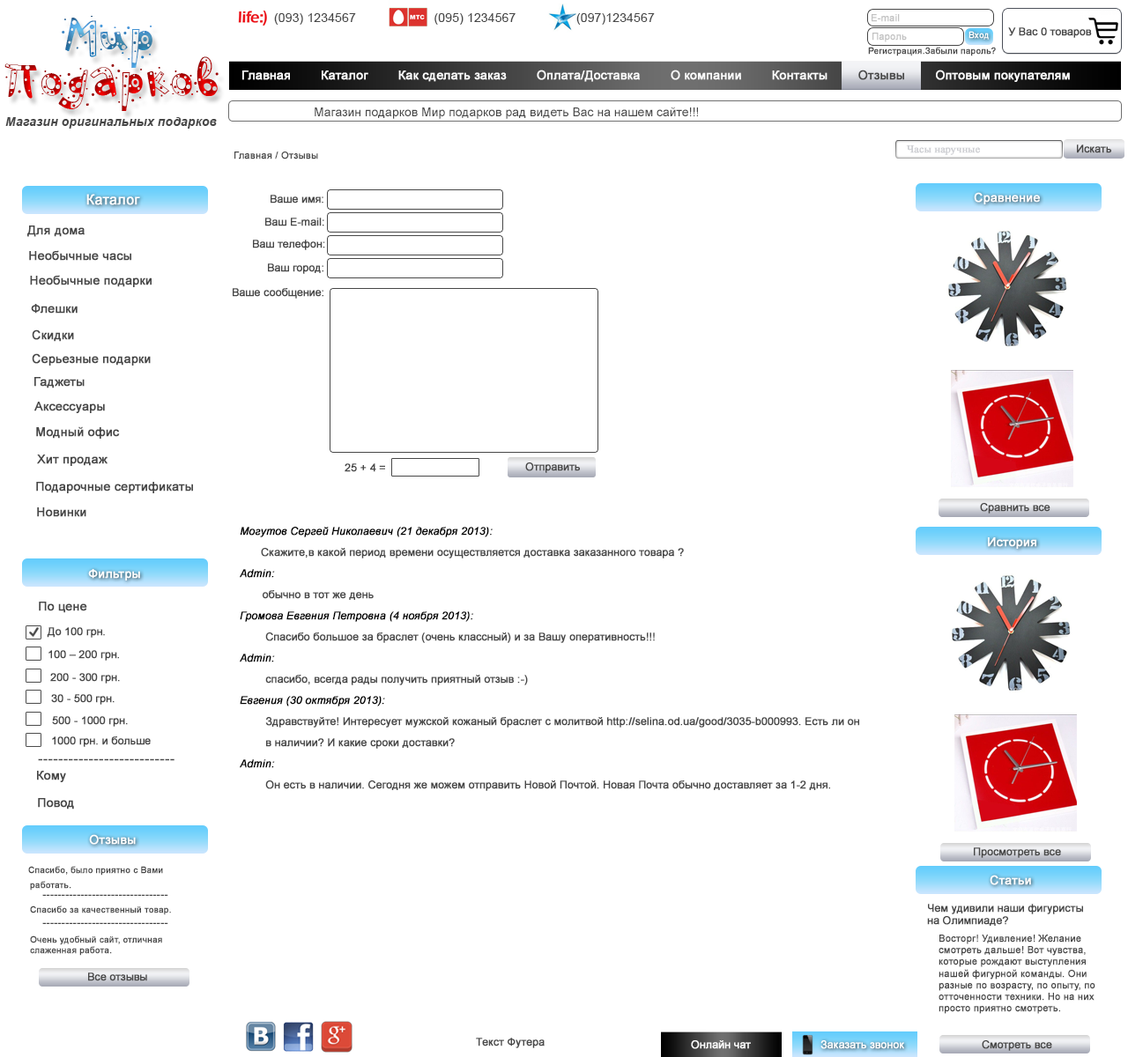
<style>
.page{position:relative;width:1128px;height:1057px;background:#ffffff}
.page>*{position:absolute;margin:0}
.t1{font:70.5px "PFPlayskoolPro-Confetti";letter-spacing:0.01em}
.t2{font:63.4px "PFPlayskoolPro-Confetti";letter-spacing:0.01em}
.t3{font:12.3px "ArialMT";letter-spacing:0.01em;color:#474747}
.t4{font:9.7px "ArialMT";color:#c1c1c1;font-weight:bold}
.t5{font:10.6px "ArialMT";color:#474747;font-weight:bold}
.t6{font:8.8px "ArialMT";color:#ffffff;font-weight:bold}
.t7{font:8.8px "ArialMT";color:#474747;font-weight:bold}
.t8{font:12.3px "ArialMT";color:#ffffff;font-weight:bold}
.t9{font:12.3px "ArialMT";color:#474747;font-weight:bold}
.t10{font:12.3px "ArialMT";color:#474747}
.t11{font:12.3px "Arial-BoldItalicMT";letter-spacing:0.01em;color:#474747}
.t12{font:10.6px "TimesNewRomanPSMT";color:#cecfd3;font-weight:bold}
.t13{font:9.7px "ArialMT";color:#474747;font-weight:bold}
.t14{font:14.1px "ArialMT";color:#ffffff;font-weight:bold}
.t15{font:10.6px/21.1px "ArialMT";color:#474747;font-weight:bold}
.t16{font:10.6px/21.1px "Arial-ItalicMT";color:#000000;font-weight:bold}
.t17{font:10.6px/21.1px "Arial-ItalicMT";color:#010101;font-weight:bold}
.t18{font:14.1px "TimesNewRomanPSMT";color:#474747;font-weight:bold}
.t19{font:10.6px "TimesNewRomanPSMT";color:#474747;font-weight:bold}
.t20{font:10.6px "ArialMT";color:#ffffff;font-weight:bold}
</style>
<div class="page">
<p class="t1" style="left:62px;top:16px;width:90px;height:52px"><span class="t2">  </span> Мир</p>
<p class="t3" style="left:274px;top:13px;width:381px;height:12px">(093) 1234567                      (095) 1234567                 (097)1234567</p>
<p class="t4" style="left:871px;top:14px;width:29px;height:8px">E-mail</p>
<p class="t5" style="left:1008px;top:27px;width:84px;height:11px">У Вас 0 товаров</p>
<p class="t4" style="left:872px;top:33px;width:35px;height:9px">Пароль</p>
<p class="t6" style="left:968px;top:31px;width:21px;height:9px">Вход</p>
<p class="t7" style="left:868px;top:47px;width:128px;height:9px">Регистрация.Забыли пароль?</p>
<p class="t1" style="left:4px;top:56px;width:215px;height:55px">Подарков</p>
<p class="t8" style="left:242px;top:70px;width:828px;height:12px">Главная        Каталог        Как сделать заказ        Оплата/Доставка        О компании        Контакты        <span class="t9">Отзывы </span>       Оптовым покупателям</p>
<p class="t10" style="left:315px;top:107px;width:383px;height:12px">Магазин подарков Мир подарков рад видеть Вас на нашем сайте!!!</p>
<p class="t11" style="left:5px;top:117px;width:212px;height:12px">Магазин оригинальных подарков</p>
<p class="t12" style="left:906px;top:145px;width:74px;height:10px">Часы наручные</p>
<p class="t5" style="left:1077px;top:144px;width:34px;height:9px">Искать</p>
<p class="t13" style="left:234px;top:152px;width:84px;height:7px">Главная / Отзывы</p>
<p class="t14" style="left:86px;top:194px;width:54px;height:11px">Каталог</p>
<p class="t5" style="left:270px;top:195px;width:53px;height:9px">Ваше имя:</p>
<p class="t8" style="left:974px;top:192px;width:66px;height:12px">Сравнение</p>
<p class="t5" style="left:265px;top:218px;width:59px;height:8px">Ваш E-mail:</p>
<p class="t9" style="left:27px;top:226px;width:58px;height:11px">Для дома</p>
<p class="t5" style="left:253px;top:240px;width:72px;height:10px">Ваш телефон:</p>
<p class="t9" style="left:29px;top:250px;width:102px;height:11px">Необычные часы</p>
<p class="t5" style="left:268px;top:263px;width:55px;height:11px">Ваш город:</p>
<p class="t9" style="left:30px;top:275px;width:122px;height:12px">Необычные подарки</p>
<p class="t5" style="left:233px;top:288px;width:90px;height:11px">Ваше сообщение:</p>
<p class="t9" style="left:31px;top:304px;width:47px;height:10px">Флешки</p>
<p class="t9" style="left:32px;top:330px;width:42px;height:12px">Скидки</p>
<p class="t9" style="left:32px;top:353px;width:119px;height:13px">Серьезные подарки</p>
<p class="t9" style="left:34px;top:377px;width:51px;height:12px">Гаджеты</p>
<p class="t9" style="left:34px;top:402px;width:71px;height:11px">Аксессуары</p>
<p class="t9" style="left:36px;top:426px;width:84px;height:13px">Модный офис</p>
<p class="t9" style="left:37px;top:455px;width:70px;height:11px">Хит продаж</p>
<p class="t5" style="left:345px;top:463px;width:40px;height:9px">25 + 4 =</p>
<p class="t5" style="left:525px;top:463px;width:55px;height:10px">Отправить</p>
<p class="t9" style="left:36px;top:482px;width:157px;height:11px">Подарочные сертификаты</p>
<p class="t9" style="left:37px;top:508px;width:49px;height:9px">Новинки</p>
<p class="t5" style="left:980px;top:503px;width:70px;height:11px">Сравнить все</p>
<p class="t15" style="left:240px;top:527px;width:619px;height:264px"><span class="t16">Могутов Сергей Николаевич (21 декабря 2013):<br>     </span>  Скажите,в какой период времени осуществляется доставка заказанного товара ?<br><span class="t16">Admin:<br></span>       обычно в тот же день<br><span class="t16">Громова Евгения Петровна (4 ноября 2013):<br></span>        Спасибо большое за браслет (очень классный) и за Вашу оперативность!!!<br><span class="t17">Admin:<br></span>        спасибо, всегда рады получить приятный отзыв :-)<br><span class="t16">Евгения (30 октября 2013):<br></span>        Здравствуйте! Интересует мужской кожаный браслет с молитвой http://selina.od.ua/good/3035-b000993. Есть ли он <br>        в наличии? И какие сроки доставки?<br><span class="t17">Admin:<br></span>        Он есть в наличии. Сегодня же можем отправить Новой Почтой. Новая Почта обычно доставляет за 1-2 дня.</p>
<p class="t8" style="left:988px;top:537px;width:48px;height:12px">История</p>
<p class="t8" style="left:88px;top:569px;width:52px;height:12px">Фильтры</p>
<p class="t9" style="left:39px;top:602px;width:48px;height:11px">По цене</p>
<p class="t5" style="left:47px;top:627px;width:58px;height:11px">До 100 грн.</p>
<p class="t5" style="left:48px;top:650px;width:71px;height:11px">100 – 200 грн.</p>
<p class="t5" style="left:50px;top:673px;width:70px;height:11px">200 - 300 грн.</p>
<p class="t5" style="left:51px;top:694px;width:64px;height:11px">30 - 500 грн.</p>
<p class="t5" style="left:52px;top:716px;width:76px;height:11px">500 - 1000 грн.</p>
<p class="t5" style="left:52px;top:737px;width:99px;height:10px">1000 грн. и больше</p>
<p class="t18" style="left:38px;top:759px;width:136px;height:2px">---------------------------</p>
<p class="t9" style="left:37px;top:771px;width:29px;height:11px">Кому</p>
<p class="t9" style="left:38px;top:798px;width:36px;height:12px">Повод</p>
<p class="t8" style="left:89px;top:834px;width:47px;height:11px">Отзывы</p>
<p class="t5" style="left:974px;top:848px;width:87px;height:10px">Просмотреть все</p>
<p class="t7" style="left:28px;top:866px;width:135px;height:10px">Спасибо, было приятно с Вами</p>
<p class="t7" style="left:30px;top:881px;width:41px;height:10px">работать.</p>
<p class="t8" style="left:989px;top:875px;width:42px;height:10px">Статьи</p>
<p class="t7" style="left:30px;top:906px;width:141px;height:9px">Спасибо за качественный товар.</p>
<p class="t19" style="left:42px;top:894px;width:126px;height:2px">---------------------------------</p>
<p class="t5" style="left:927px;top:904px;width:156px;height:22px">Чем удивили наши фигуристы<br>на Олимпиаде?</p>
<p class="t19" style="left:42px;top:923px;width:126px;height:1px">---------------------------------</p>
<p class="t7" style="left:30px;top:936px;width:132px;height:20px">Очень удобный сайт, отличная <br>слаженная работа.</p>
<p class="t13" style="left:938px;top:935px;width:157px;height:79px">Восторг! Удивление! Желание <br>смотреть дальше! Вот чувства, <br>которые рождают выступления <br>нашей фигурной команды. Они <br>разные по возрасту, по опыту, по <br>отточенности техники. Но на них <br>просто приятно смотреть.</p>
<p class="t5" style="left:88px;top:973px;width:59px;height:9px">Все отзывы</p>
<p class="t5" style="left:476px;top:1038px;width:69px;height:10px">Текст Футера</p>
<p class="t20" style="left:691px;top:1041px;width:60px;height:8px">Онлайн чат</p>
<p class="t20" style="left:820px;top:1041px;width:84px;height:8px">Заказать звонок</p>
<p class="t5" style="left:982px;top:1041px;width:70px;height:10px">Смотреть все</p>
</div>
